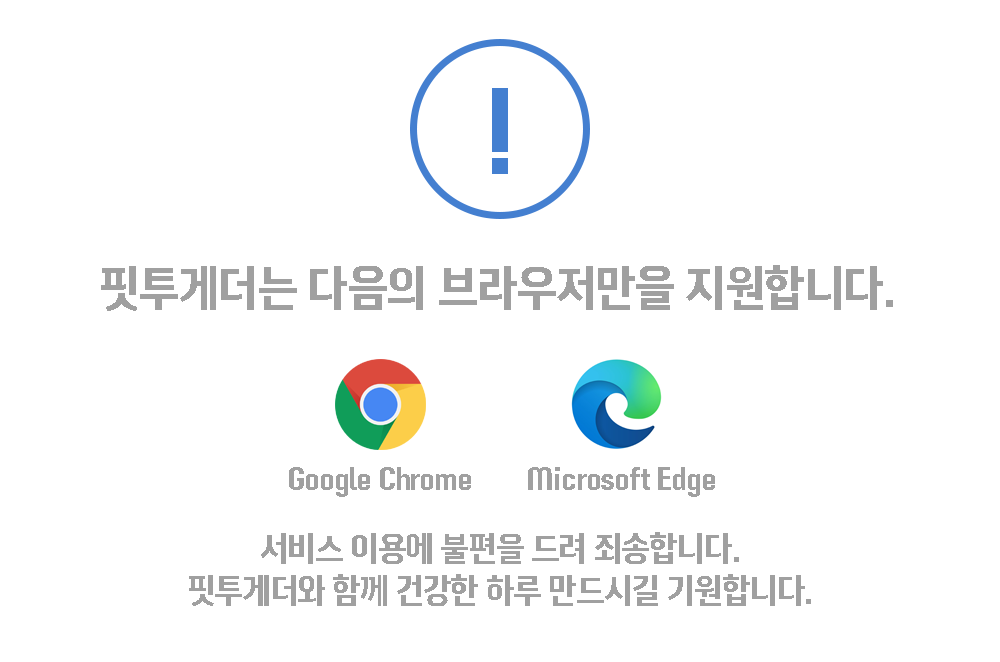
<style>
.page{position:relative;width:1000px;height:662px;background:#ffffff}
.page>*{position:absolute;margin:0}
.t1{font:90px "RecipekoreaM";letter-spacing:-0.04em;color:#447fd0}
.t2{font:50px "InfinitySans-CondBold";letter-spacing:-0.04em;color:#a0a0a0}
.t3{font:30px "InfinitySans-CondBold";letter-spacing:-0.04em;color:#a0a0a0}
.t4{font:35px "InfinitySans-CondBold";letter-spacing:-0.04em;color:#a0a0a0}
</style>
<div class="page">
<p class="t1" style="left:492px;top:88px;width:16px;height:86px">!</p>
<p class="t2" style="left:101px;top:265px;width:792px;height:46px">핏투게더는 다음의 브라우저만을 지원합니다.</p>
<p class="t3" style="left:289px;top:467px;width:182px;height:30px">Google Chrome</p>
<p class="t3" style="left:528px;top:467px;width:187px;height:30px">Microsoft Edge</p>
<p class="t4" style="left:189px;top:532px;width:622px;height:74px;text-align:center">서비스 이용에 불편을 드려 죄송합니다.<br>핏투게더와 함께 건강한 하루 만드시길 기원합니다.</p>
</div>
